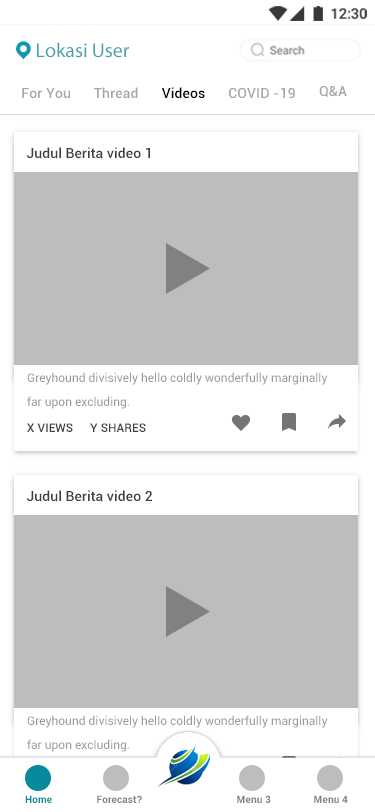
<style>
.page{position:relative;width:375px;height:812px;background:#ffffff}
.page>*{position:absolute;margin:0}
.t1{font:20px "MyriadPro-Regular";color:#4aa1ae}
.t2{font:14px "Roboto-Medium";letter-spacing:0.01em;color:#a7a7a7}
.t3{font:14px "Roboto-Medium";letter-spacing:0.01em;color:#000000}
.t4{font:14px "Roboto-Medium";letter-spacing:0.005em;color:#404040}
.t5{font:12px/24px "Roboto-Regular";color:#9a9a9a}
.t6{font:12px "Roboto-Medium";letter-spacing:0.005em;color:#404040;text-transform:uppercase}
.t7{font:10px "Roboto-Bold";letter-spacing:0.005em;color:#088a9d}
.t8{font:10px "Roboto-Bold";letter-spacing:0.005em;color:#828282}
</style>
<div class="page">
<p class="t1" style="left:37px;top:42px;width:92px;height:16px">Lokasi User</p>
<p class="t2" style="left:22px;top:88px;width:48px;height:11px">For You</p>
<p class="t2" style="left:94px;top:87px;width:44px;height:12px">Thread</p>
<p class="t3" style="left:162px;top:87px;width:43px;height:11px">Videos</p>
<p class="t2" style="left:229px;top:88px;width:66px;height:10px">COVID -19</p>
<p class="t2" style="left:319px;top:86px;width:28px;height:11px">Q&amp;A</p>
<p class="t4" style="left:27px;top:147px;width:123px;height:12px">Judul Berita video 1</p>
<p class="t5" style="left:27px;top:372px;width:301px;height:37px">Greyhound divisively hello coldly wonderfully marginally<br>far upon excluding.</p>
<p class="t6" style="left:27px;top:423px;width:46px;height:9px">X views</p>
<p class="t6" style="left:90px;top:423px;width:56px;height:9px">Y Shares</p>
<p class="t4" style="left:27px;top:490px;width:125px;height:12px">Judul Berita video 2</p>
<p class="t5" style="left:27px;top:715px;width:301px;height:37px">Greyhound divisively hello coldly wonderfully marginally<br>far upon excluding.</p>
<p class="t7" style="left:25px;top:795px;width:27px;height:8px">Home</p>
<p class="t8" style="left:97px;top:795px;width:45px;height:8px">Forecast?</p>
<p class="t8" style="left:237px;top:795px;width:34px;height:8px">Menu 3</p>
<p class="t8" style="left:314px;top:795px;width:34px;height:8px">Menu 4</p>
</div>
